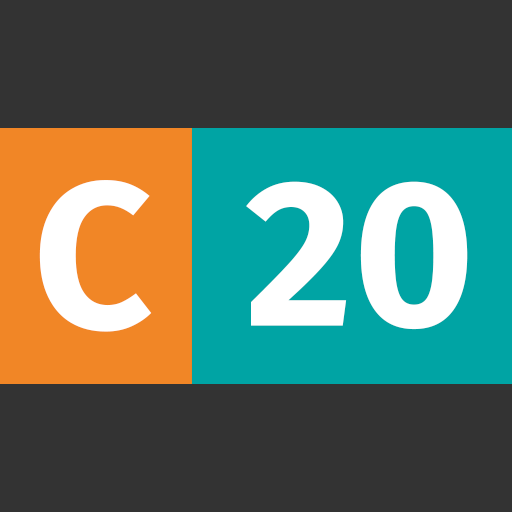
<style>
.page{position:relative;width:512px;height:512px;background:#333333}
.page>*{position:absolute;margin:0}
.t1{font:208.3px "FiraSans-Bold";color:#ffffff}
</style>
<div class="page">
<p class="t1" style="left:39px;top:180px;width:113px;height:152px">C</p>
<p class="t1" style="left:246px;top:181px;width:222px;height:149px">20</p>
</div>
